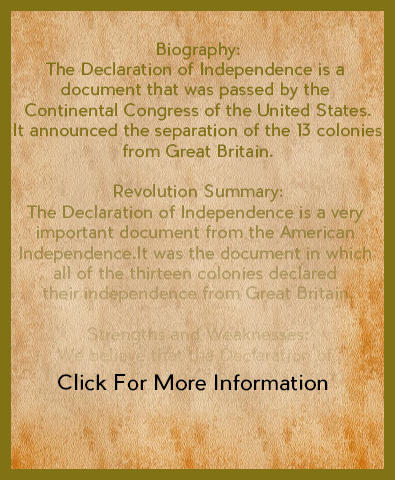
<style>
.page{position:relative;width:395px;height:480px}
.page>*{position:absolute;margin:0}
.t1{font:17px "PierSans"}
.t2{font:21px "PierSans";color:#000000}
</style>
<div class="page">
<p class="t1" style="left:14px;top:42px;width:368px;height:422px;text-align:center">Biography:<br>The Declaration of Independence is a <br>document that was passed by the <br>Continental Congress of the United States.<br> It announced the separation of the 13 colonies <br>from Great Britain.<br><br>Revolution Summary:<br>The Declaration of Independence is a very <br>important document from the American <br>Independence.It was the document in which <br>all of the thirteen colonies declared <br>their independence from Great Britain.<br><br>Strengths and Weaknesses:<br>We believe that the Declaration of <br>Independence would be a very strong <br>addition to our revolution team because<br> it would allow the people of each <br>revolution to become independent of their <br>rulers.</p>
<p class="t2" style="left:58px;top:373px;width:270px;height:18px">Click For More Information</p>
</div>
